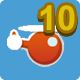
<style>
.page{position:relative;width:80px;height:80px;background:#499ed3}
.page>*{position:absolute;margin:0}
.t1{font:34px "Arial-BoldMT";color:#e9ab18}
</style>
<div class="page">
<p class="t1" style="left:40px;top:5px;width:35px;height:26px">10</p>
</div>
